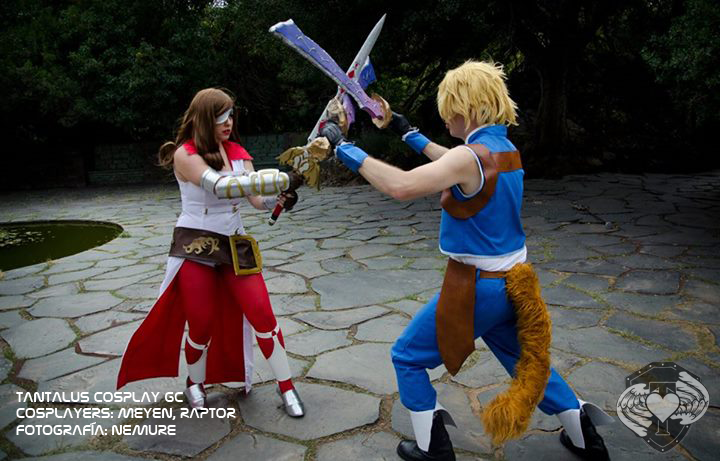
<style>
.page{position:relative;width:720px;height:461px}
.page>*{position:absolute;margin:0}
.t1{font:14px "NasalizationRg-Regular";color:#ffffff}
</style>
<div class="page">
<p class="t1" style="left:16px;top:392px;width:220px;height:43px">TANTALUS COSPLAY GC<br>COSPLAYERS: MEYEN, RAPTOR<br>FOTOGRAFÍA: NEMURE</p>
</div>
